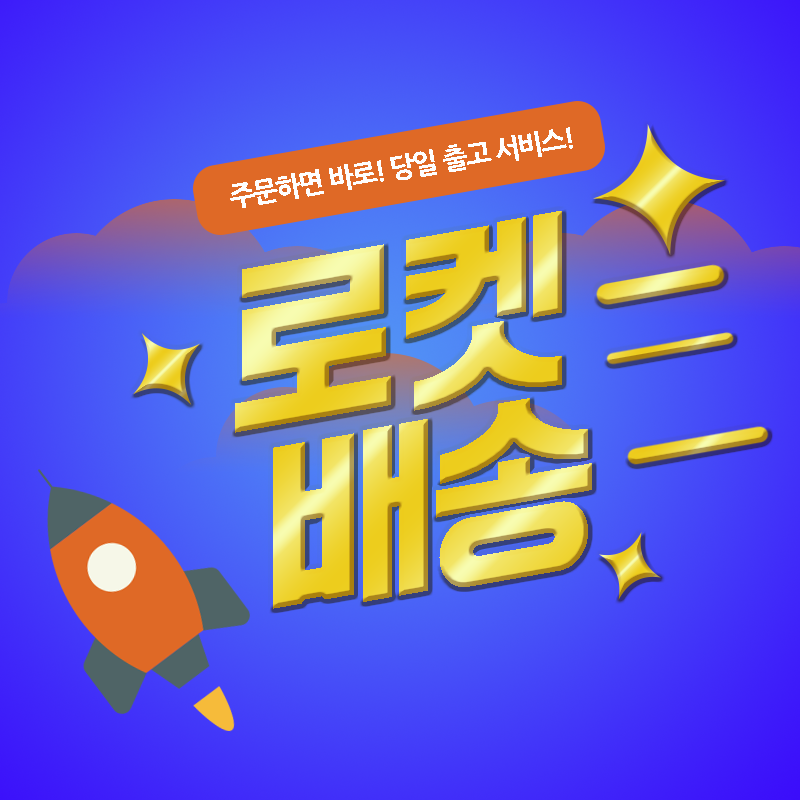
<style>
.page{position:relative;width:800px;height:800px}
.page>*{position:absolute;margin:0}
.t1{font:27px "NanumGothicExtraBold";letter-spacing:-0.06em;color:#fefefe}
.t2{font:180px/186px "DXNPeriod-KSCpc-EUC-H";letter-spacing:-0.02em;font-style:italic}
.t3{font:180px/182px "DXNPeriod-KSCpc-EUC-H";letter-spacing:-0.06em;font-style:italic}
</style>
<div class="page">
<p class="t1" style="left:230px;top:127px;width:343px;height:81px;rotate:-10deg">주문하면 바로! 당일 출고 서비스!</p>
<p class="t2" style="left:235px;top:211px;width:357px;height:398px;text-align:center;rotate:-10deg">로켓<br><span class="t3">배송</span></p>
</div>
